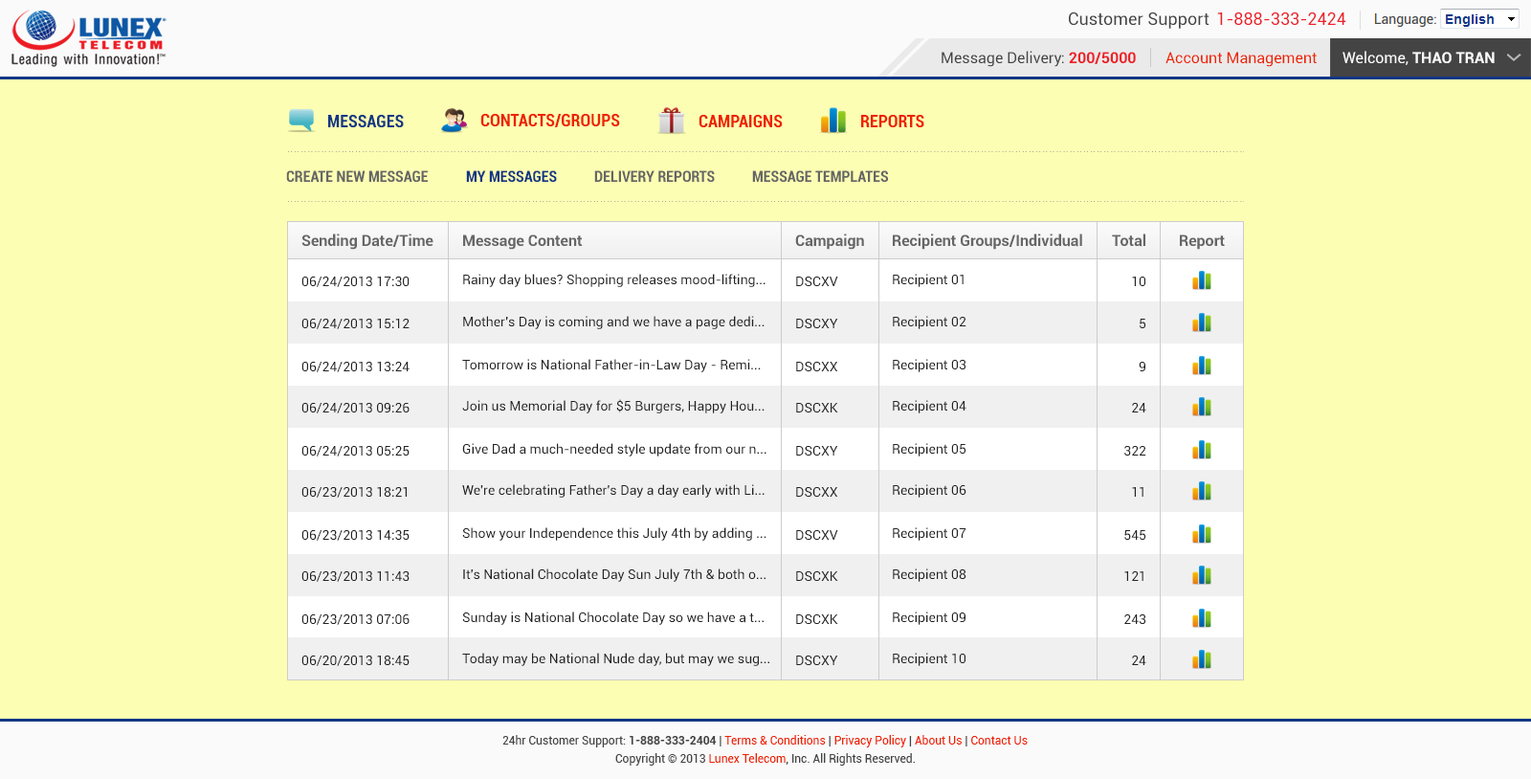
<style>
.page{position:relative;width:1531px;height:779px;background:#fcffb3}
.page>*{position:absolute;margin:0}
.t1{font:17.2px "Roboto-Regular";color:#444444}
.t2{font:17.2px "Roboto-Regular";color:#ec2029}
.t3{font:15.3px "Roboto-Regular";color:#444444}
.t4{font:15.3px "Roboto-Bold";color:#ec2028}
.t5{font:15.3px "Roboto-Regular";color:#ee2200}
.t6{font:15.3px "Roboto-Bold";color:#fafafa}
.t7{font:15.3px "Roboto-Regular";color:#fafafa}
.t8{font:17.2px "Roboto-BoldCondensed";color:#ee2200}
.t9{font:17.2px "Roboto-BoldCondensed";color:#123785}
.t10{font:15.3px "Roboto-BoldCondensed";color:#666666}
.t11{font:15.3px "Roboto-BoldCondensed";color:#123785}
.t12{font:15.3px "Roboto-Bold";color:#666666}
.t13{font:13.4px "Roboto-Regular";color:#222222}
.t14{font:11.5px "Roboto-Regular";color:#444444}
.t15{font:11.5px "Roboto-Bold";color:#444444}
.t16{font:11.5px "Roboto-Regular";color:#ee2200}
</style>
<div class="page">
<p class="t1" style="left:1069px;top:12px;width:140px;height:17px">Customer Support</p>
<p class="t2" style="left:1217px;top:12px;width:129px;height:13px">1-888-333-2424</p>
<p class="t3" style="left:942px;top:51px;width:194px;height:16px">Message Delivery: <span class="t4">200/5000</span></p>
<p class="t5" style="left:1165px;top:52px;width:152px;height:15px">Account Management</p>
<p class="t6" style="left:1342px;top:51px;width:153px;height:14px"><span class="t7">Welcome, </span>THAO TRAN</p>
<p class="t8" style="left:480px;top:114px;width:140px;height:13px">CONTACTS/GROUPS</p>
<p class="t9" style="left:328px;top:115px;width:76px;height:12px">MESSAGES</p>
<p class="t8" style="left:699px;top:115px;width:84px;height:12px">CAMPAIGNS</p>
<p class="t8" style="left:861px;top:115px;width:63px;height:12px">REPORTS</p>
<p class="t10" style="left:286px;top:170px;width:142px;height:12px">CREATE NEW MESSAGE</p>
<p class="t11" style="left:466px;top:170px;width:91px;height:12px">MY MESSAGES</p>
<p class="t10" style="left:594px;top:170px;width:121px;height:12px">DELIVERY REPORTS</p>
<p class="t10" style="left:752px;top:170px;width:136px;height:12px">MESSAGE TEMPLATES</p>
<p class="t12" style="left:301px;top:233px;width:132px;height:17px">Sending Date/Time</p>
<p class="t12" style="left:795px;top:233px;width:69px;height:17px">Campaign</p>
<p class="t12" style="left:893px;top:233px;width:189px;height:17px">Recipient Groups/Individual</p>
<p class="t12" style="left:1112px;top:233px;width:33px;height:14px">Total</p>
<p class="t12" style="left:463px;top:234px;width:120px;height:16px">Message Content</p>
<p class="t12" style="left:1180px;top:234px;width:45px;height:16px">Report</p>
<p class="t13" style="left:301px;top:277px;width:109px;height:10px">06/24/2013 17:30</p>
<p class="t13" style="left:463px;top:274px;width:302px;height:13px">Rainy day blues? Shopping releases mood-lifting...</p>
<p class="t13" style="left:796px;top:277px;width:42px;height:9px">DSCXV</p>
<p class="t13" style="left:893px;top:274px;width:71px;height:13px">Recipient 01</p>
<p class="t13" style="left:1132px;top:277px;width:13px;height:9px">10</p>
<p class="t13" style="left:463px;top:316px;width:302px;height:13px">Mother's Day is coming and we have a page dedi...</p>
<p class="t13" style="left:893px;top:316px;width:73px;height:13px">Recipient 02</p>
<p class="t13" style="left:301px;top:319px;width:109px;height:10px">06/24/2013 15:12</p>
<p class="t13" style="left:796px;top:319px;width:42px;height:9px">DSCXY</p>
<p class="t13" style="left:1140px;top:319px;width:6px;height:9px">5</p>
<p class="t13" style="left:301px;top:362px;width:109px;height:10px">06/24/2013 13:24</p>
<p class="t13" style="left:462px;top:359px;width:299px;height:13px">Tomorrow is National Father-in-Law Day - Remi...</p>
<p class="t13" style="left:796px;top:362px;width:42px;height:9px">DSCXX</p>
<p class="t13" style="left:893px;top:359px;width:72px;height:13px">Recipient 03</p>
<p class="t13" style="left:1139px;top:362px;width:6px;height:9px">9</p>
<p class="t13" style="left:462px;top:399px;width:303px;height:14px">Join us Memorial Day for $5 Burgers, Happy Hou...</p>
<p class="t13" style="left:893px;top:400px;width:73px;height:13px">Recipient 04</p>
<p class="t13" style="left:301px;top:403px;width:109px;height:10px">06/24/2013 09:26</p>
<p class="t13" style="left:796px;top:403px;width:42px;height:9px">DSCXK</p>
<p class="t13" style="left:1132px;top:403px;width:14px;height:9px">24</p>
<p class="t13" style="left:301px;top:446px;width:109px;height:10px">06/24/2013 05:25</p>
<p class="t13" style="left:462px;top:443px;width:304px;height:13px">Give Dad a much-needed style update from our n...</p>
<p class="t13" style="left:796px;top:446px;width:42px;height:9px">DSCXY</p>
<p class="t13" style="left:893px;top:443px;width:73px;height:13px">Recipient 05</p>
<p class="t13" style="left:1124px;top:446px;width:22px;height:9px">322</p>
<p class="t13" style="left:462px;top:484px;width:303px;height:14px">We're celebrating Father's Day a day early with Li...</p>
<p class="t13" style="left:893px;top:484px;width:73px;height:14px">Recipient 06</p>
<p class="t13" style="left:301px;top:487px;width:106px;height:11px">06/23/2013 18:21</p>
<p class="t13" style="left:796px;top:487px;width:42px;height:10px">DSCXX</p>
<p class="t13" style="left:1132px;top:487px;width:11px;height:10px">11</p>
<p class="t13" style="left:301px;top:530px;width:109px;height:11px">06/23/2013 14:35</p>
<p class="t13" style="left:462px;top:527px;width:304px;height:14px">Show your Independence this July 4th by adding ...</p>
<p class="t13" style="left:796px;top:530px;width:42px;height:10px">DSCXV</p>
<p class="t13" style="left:893px;top:527px;width:73px;height:14px">Recipient 07</p>
<p class="t13" style="left:1124px;top:530px;width:22px;height:10px">545</p>
<p class="t13" style="left:463px;top:568px;width:302px;height:14px">It's National Chocolate Day Sun July 7th &amp; both o...</p>
<p class="t13" style="left:893px;top:568px;width:73px;height:14px">Recipient 08</p>
<p class="t13" style="left:301px;top:571px;width:109px;height:11px">06/23/2013 11:43</p>
<p class="t13" style="left:796px;top:571px;width:42px;height:10px">DSCXK</p>
<p class="t13" style="left:1124px;top:571px;width:19px;height:10px">121</p>
<p class="t13" style="left:301px;top:614px;width:109px;height:11px">06/23/2013 07:06</p>
<p class="t13" style="left:462px;top:611px;width:302px;height:14px">Sunday is National Chocolate Day so we have a t...</p>
<p class="t13" style="left:796px;top:614px;width:42px;height:10px">DSCXK</p>
<p class="t13" style="left:893px;top:611px;width:72px;height:14px">Recipient 09</p>
<p class="t13" style="left:1124px;top:614px;width:21px;height:10px">243</p>
<p class="t13" style="left:462px;top:653px;width:307px;height:13px">Today may be National Nude day, but may we sug...</p>
<p class="t13" style="left:893px;top:653px;width:72px;height:13px">Recipient 10</p>
<p class="t13" style="left:301px;top:655px;width:109px;height:11px">06/20/2013 18:45</p>
<p class="t13" style="left:796px;top:655px;width:42px;height:10px">DSCXY</p>
<p class="t13" style="left:1132px;top:655px;width:14px;height:10px">24</p>
<p class="t14" style="left:502px;top:735px;width:526px;height:12px">24hr Customer Support: <span class="t15">1-888-333-2404</span> | <span class="t16">Terms &amp; Conditions</span> | <span class="t16">Privacy Policy</span> | <span class="t16">About Us</span> | <span class="t16">Contact Us</span></p>
<p class="t14" style="left:615px;top:753px;width:300px;height:12px">Copyright © 2013 <span class="t16">Lunex Telecom</span>, Inc. All Rights Reserved.</p>
</div>
